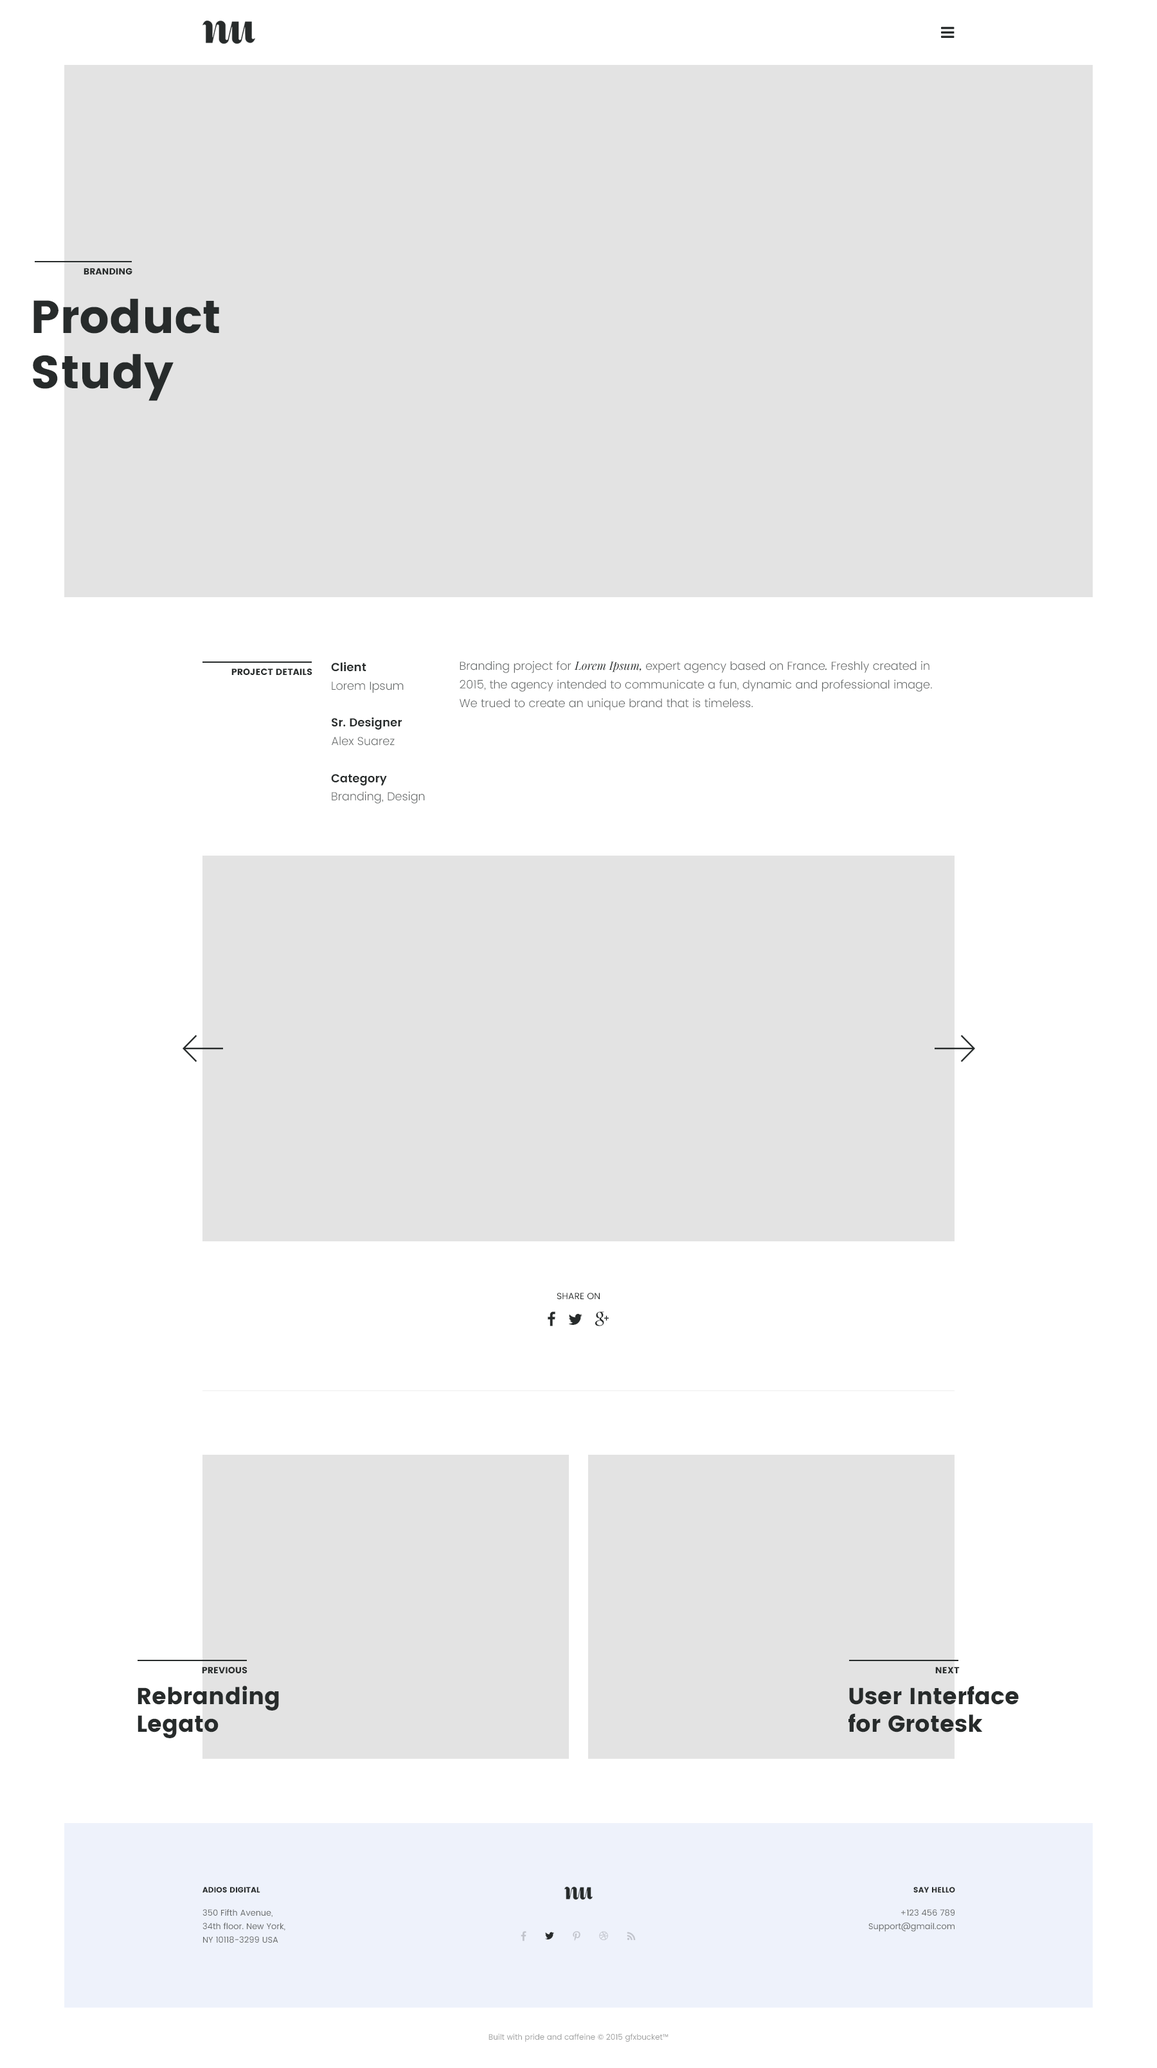
<style>
.page{position:relative;width:1157px;height:2068px;background:#ffffff}
.page>*{position:absolute;margin:0}
.t1{font:9px "Poppins";color:#272b2b;text-transform:uppercase}
.t2{font:46.3px "Poppins";color:#272b2b}
.t3{font:11.6px/18.5px "Poppins-Light";color:#676a6a}
.t4{font:11.6px/18.5px "Poppins-SemiBold";color:#272b2b}
.t5{font:11.6px/18.5px "PlayfairDisplay-Italic";color:#272b2b}
.t6{font:11.6px/18.5px "PlayfairDisplay-Italic";color:#676a6a}
.t7{font:9px "Poppins-Regular";color:#272b2b;text-transform:uppercase}
.t8{font:23.1px "Poppins";color:#272b2b}
.t9{font:8.4px/13.4px "Poppins-Regular";color:#676a6a}
.t10{font:7.7px/13.4px "Poppins";color:#272b2b;text-transform:uppercase}
.t11{font:8.4px/23.1px "Poppins-Regular";color:#676a6a}
.t12{font:7.7px "Poppins-Regular";color:#9e9f9f}
</style>
<div class="page">
<p class="t1" style="left:84px;top:268px;width:48px;height:6px">branding</p>
<p class="t2" style="left:33px;top:298px;width:186px;height:103px">Product<br>Study</p>
<p class="t3" style="left:331px;top:662px;width:94px;height:142px"><span class="t4">Client<br></span>Lorem Ipsum<br><span class="t4"><br>Sr. Designer<br></span>Alex Suarez<br><br><span class="t4">Category<br></span>Branding, Design</p>
<p class="t3" style="left:460px;top:661px;width:472px;height:49px">Branding project for <span class="t5">Lorem Ipsum, </span>expert agency based on France<span class="t6">. </span>Freshly created in 2015, the agency intended to communicate a fun, dynamic and professional image. <br>We trued to create an unique brand that is timeless.</p>
<p class="t1" style="left:231px;top:669px;width:81px;height:6px">Project details</p>
<p class="t7" style="left:557px;top:1293px;width:43px;height:6px">Share on</p>
<p class="t1" style="left:202px;top:1667px;width:46px;height:6px">Previous</p>
<p class="t1" style="left:935px;top:1667px;width:25px;height:6px">next</p>
<p class="t8" style="left:138px;top:1686px;width:141px;height:52px">Rebranding <br>Legato</p>
<p class="t8" style="left:849px;top:1686px;width:170px;height:47px">User Interface<br>for Grotesk</p>
<p class="t9" style="left:203px;top:1887px;width:82px;height:56px"><span class="t10">Adios digital<br></span><span class="t11">350 Fifth Avenue, <br></span>34th floor. New York, <br>NY 10118-3299 USA</p>
<p class="t9" style="left:869px;top:1887px;width:86px;height:45px;text-align:right"><span class="t10">Say hello<br></span><span class="t11">+123 456 789<br></span>Support@gmail.com</p>
<p class="t12" style="left:489px;top:2033px;width:180px;height:9px">Built with pride and caffeine © 2015 gfxbucket™</p>
</div>
